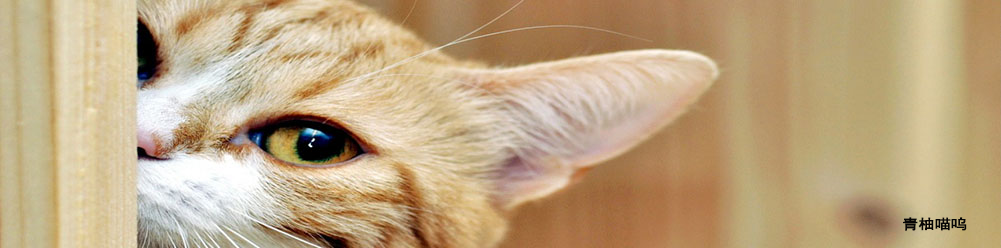
<style>
.page{position:relative;width:1001px;height:248px}
.page>*{position:absolute;margin:0}
.t1{font:14px "SimHei";color:#060606;font-weight:bold;scale:1.13 1}
</style>
<div class="page">
<p class="t1" style="left:903px;top:217px;width:64px;height:14px">青柚喵呜</p>
</div>
